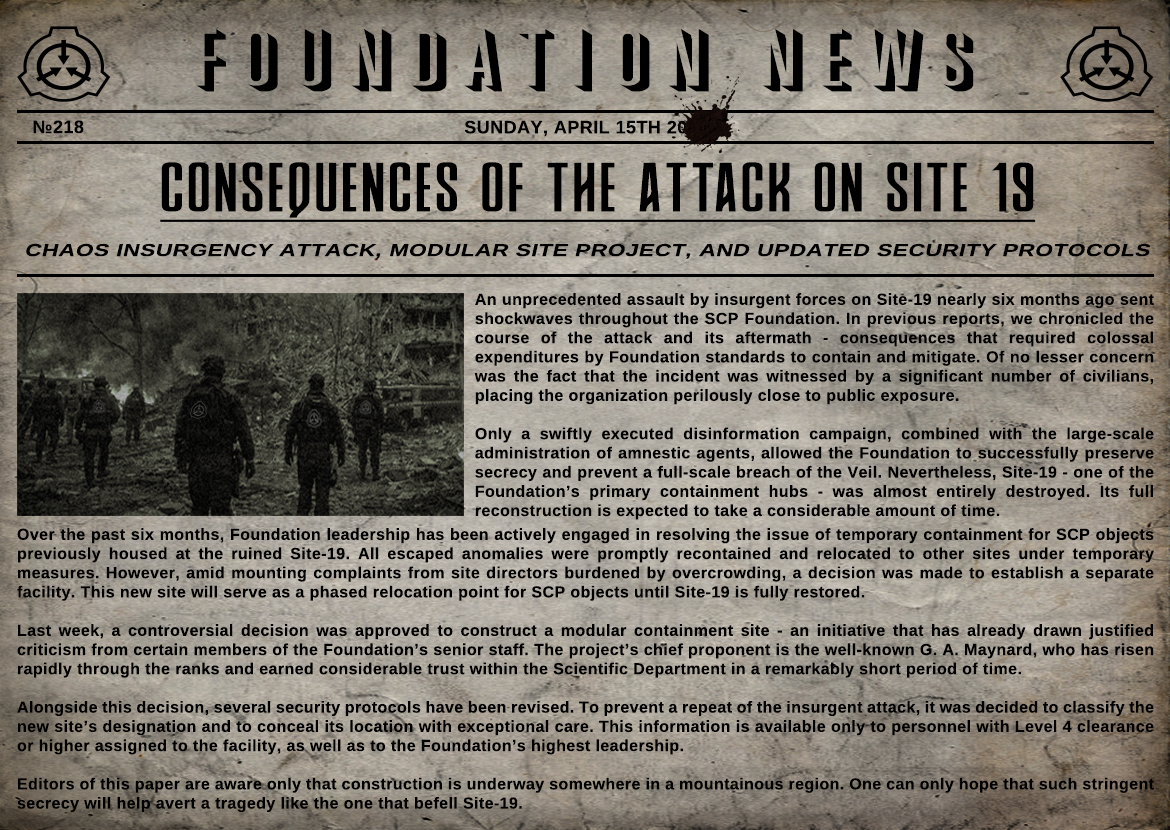
<style>
.page{position:relative;width:1170px;height:830px}
.page>*{position:absolute;margin:0}
.t1{font:72px "UKIJKufiKawak";letter-spacing:0.025em;color:#000000;text-transform:uppercase;scale:1.57 1}
.t2{font:18px "UKIJKufiGul";letter-spacing:0.025em;color:#000000;text-transform:uppercase}
.t3{font:51.9px "August-Cyr-Bold";letter-spacing:0.025em;color:#000000;text-transform:uppercase;scale:1.6 1}
.t4{font:17.3px "UKIJKufiGul";letter-spacing:0.025em;color:#000000;text-transform:uppercase;font-style:italic;scale:1.31 1}
.t5{font:16px "UKIJKufiGul";letter-spacing:0.025em;color:#000000}
</style>
<div class="page">
<p class="t1" style="left:197px;top:29px;width:777px;height:63px">FOUNDATION NEWS</p>
<p class="t2" style="left:33px;top:120px;width:51px;height:14px">№218</p>
<p class="t2" style="left:464px;top:120px;width:244px;height:17px">SUnday, april 15th 2012</p>
<p class="t3" style="left:161px;top:162px;width:873px;height:56px">Consequences of the Attack on SITE 19</p>
<p class="t4" style="left:26px;top:243px;width:1125px;height:16px">Chaos Insurgency Attack, Modular SITE Project, and Updated Security Protocols</p>
<p class="t5" style="left:474px;top:293px;width:680px;height:227px;text-align:justify">An unprecedented assault by insurgent forces on Site-19 nearly six months ago sent shockwaves throughout the SCP Foundation. In previous reports, we chronicled the course of the attack and its aftermath - consequences that required colossal expenditures by Foundation standards to contain and mitigate. Of no lesser concern was the fact that the incident was witnessed by a significant number of civilians, placing the organization perilously close to public exposure.<br><br>Only a swiftly executed disinformation campaign, combined with the large-scale administration of amnestic agents, allowed the Foundation to successfully preserve secrecy and prevent a full-scale breach of the Veil. Nevertheless, Site-19 - one of the Foundation’s primary containment hubs - was almost entirely destroyed. Its full reconstruction is expected to take a considerable amount of time.</p>
<p class="t5" style="left:17px;top:528px;width:1137px;height:284px;text-align:justify">Over the past six months, Foundation leadership has been actively engaged in resolving the issue of temporary containment for SCP objects previously housed at the ruined Site-19. All escaped anomalies were promptly recontained and relocated to other sites under temporary measures. However, amid mounting complaints from site directors burdened by overcrowding, a decision was made to establish a separate facility. This new site will serve as a phased relocation point for SCP objects until Site-19 is fully restored.<br><br>Last week, a controversial decision was approved to construct a modular containment site - an initiative that has already drawn justified criticism from certain members of the Foundation’s senior staff. The project’s chief proponent is the well-known G. A. Maynard, who has risen rapidly through the ranks and earned considerable trust within the Scientific Department in a remarkably short period of time.<br><br>Alongside this decision, several security protocols have been revised. To prevent a repeat of the insurgent attack, it was decided to classify the new site’s designation and to conceal its location with exceptional care. This information is available only to personnel with Level 4 clearance or higher assigned to the facility, as well as to the Foundation’s highest leadership.<br><br>Editors of this paper are aware only that construction is underway somewhere in a mountainous region. One can only hope that such stringent secrecy will help avert a tragedy like the one that befell Site-19.</p>
</div>
